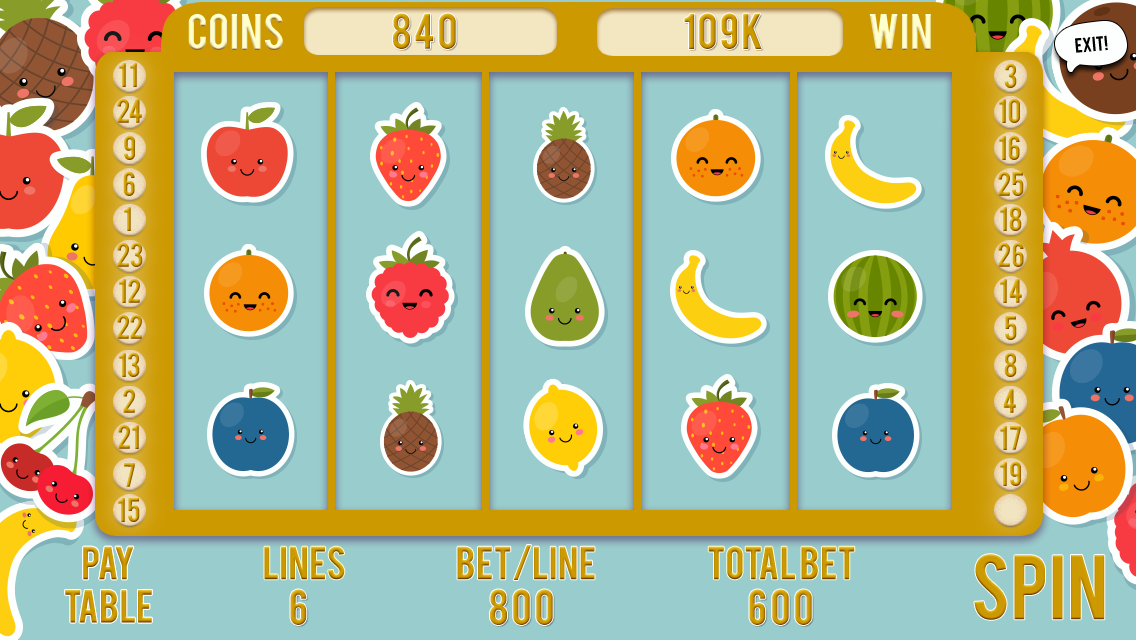
<style>
.page{position:relative;width:1136px;height:640px;background:#99cccc}
.page>*{position:absolute;margin:0}
.t1{font:40px "Bebas";color:#ffffcc}
.t2{font:16px "Bebas";color:#000000}
.t3{font:36px "Bebas";color:#cb9800}
.t4{font:72px "Bebas";color:#cc9900}
</style>
<div class="page">
<p class="t1" style="left:188px;top:13px;width:95px;height:37px">COINS</p>
<p class="t1" style="left:869px;top:14px;width:62px;height:36px">WIN</p>
<p class="t2" style="left:1075px;top:35px;width:33px;height:18px;rotate:-5deg">exit!</p>
<p class="t3" style="left:457px;top:545px;width:138px;height:35px">BET/LINE</p>
<p class="t3" style="left:65px;top:546px;width:87px;height:77px;text-align:center">PAY<br>TABLE</p>
<p class="t3" style="left:65px;top:546px;width:87px;height:77px;text-align:center">PAY<br>TABLE</p>
<p class="t3" style="left:264px;top:546px;width:81px;height:34px">LINES</p>
<p class="t3" style="left:708px;top:546px;width:147px;height:34px">TOTAL BET</p>
<p class="t4" style="left:974px;top:554px;width:131px;height:66px">SPIN</p>
</div>
